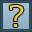
<style>
.page{position:relative;width:32px;height:32px}
.page>*{position:absolute;margin:0}
.t1{font:30px "LucidaConsole";color:#eecd36}
</style>
<div class="page">
<p class="t1" style="left:9px;top:5px;width:15px;height:22px">?</p>
</div>
